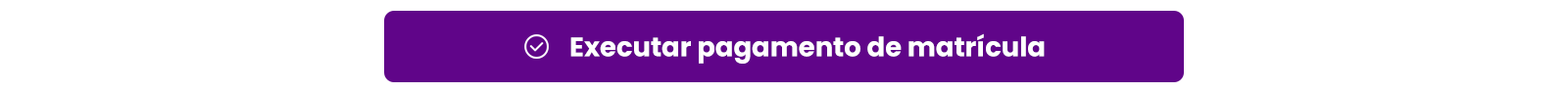
<style>
.page{position:relative;width:1568px;height:93px;background:#ffffff}
.page>*{position:absolute;margin:0}
.t1{font:26.9px "Poppins-Bold";color:#ffffff}
</style>
<div class="page">
<p class="t1" style="left:570px;top:33px;width:475px;height:31px">Executar pagamento de matrícula</p>
</div>
